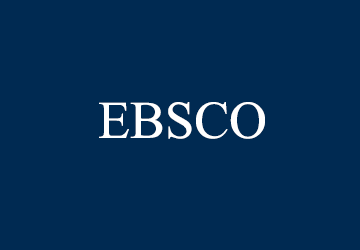
<style>
.page{position:relative;width:360px;height:250px;background:#002a52}
.page>*{position:absolute;margin:0}
.t1{font:52.7px "TimesNewRomanPSMT";color:#ffffff}
</style>
<div class="page">
<p class="t1" style="left:99px;top:102px;width:166px;height:37px">EBSCO</p>
</div>
